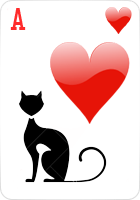
<style>
.page{position:relative;width:140px;height:200px;background:#ffffff}
.page>*{position:absolute;margin:0}
.t1{font:26px "CardCharacters";color:#ff2b2b}
</style>
<div class="page">
<p class="t1" style="left:10px;top:8px;width:16px;height:22px">A</p>
</div>
